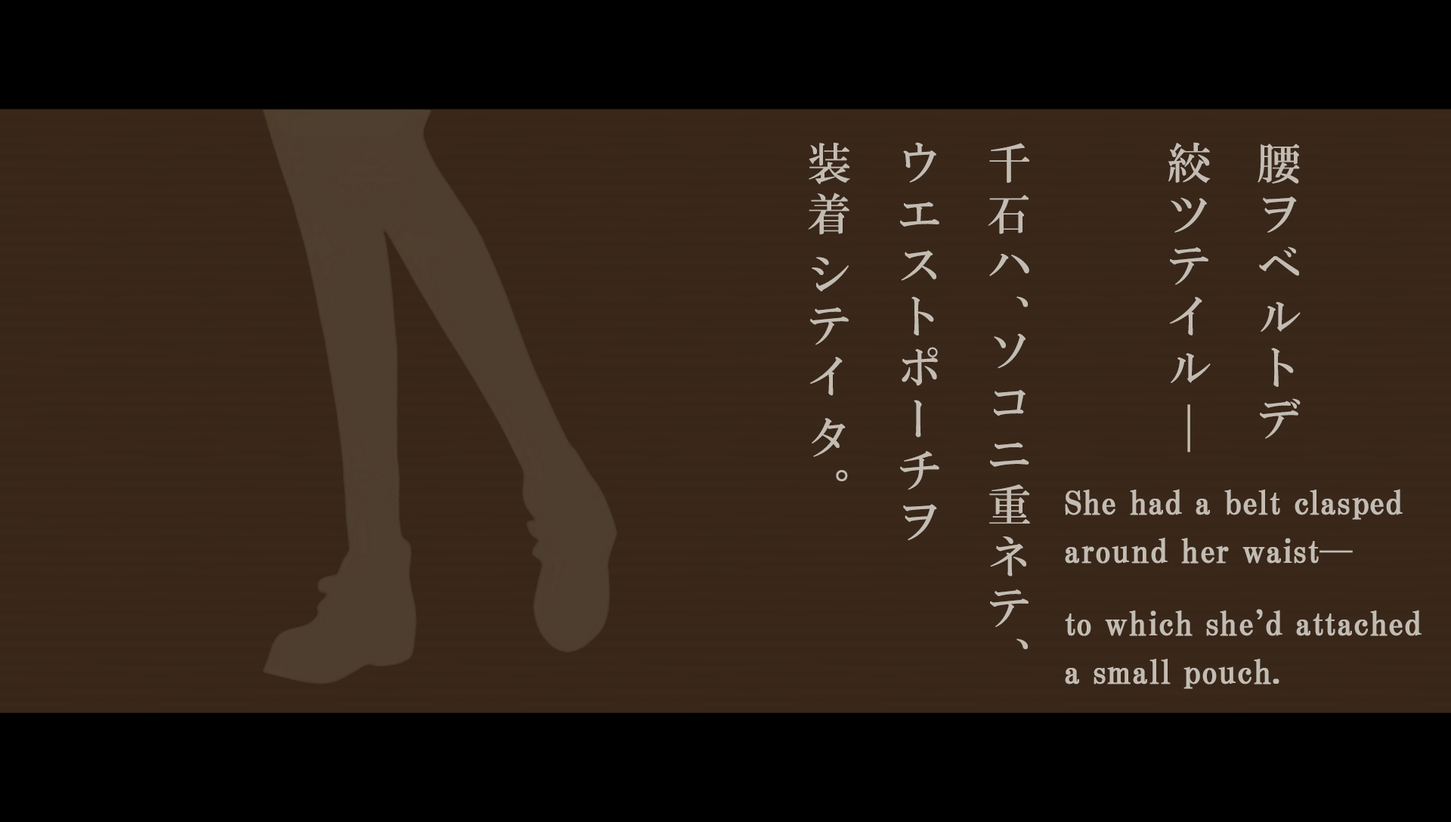
<style>
.page{position:relative;width:1451px;height:822px;background:#000000}
.page>*{position:absolute;margin:0}
.t1{font:43.8px/89.9px "HGMinchoB";letter-spacing:0.17em;color:#c3bcb3}
.t2{font:43.8px/89.9px "HGMinchoB";letter-spacing:0.35em;color:#c3bcb3}
.t3{font:43.8px/89.9px "HGMinchoB";letter-spacing:0.17em;color:#c3bcb3;scale:1.08 1}
.t4{font:43.8px/89.9px "HGMinchoB";letter-spacing:-0.21em;color:#c3bcb3}
.t5{font:43.8px/89.9px "HGMinchoB";letter-spacing:0.37em;color:#c3bcb3}
.t6{font:43.8px/89.9px "HGMinchoB";letter-spacing:0.41em;color:#c3bcb3}
.t7{font:32.2px/48.4px "HGPMinchoB";letter-spacing:0.01em;color:#c3bcb3;font-weight:bold}
.t8{font:32.2px/72.5px "HGPMinchoB";letter-spacing:0.01em;color:#c3bcb3;font-weight:bold}
.t9{font:32.2px/72.5px "HGPMinchoB";letter-spacing:-0.075em;color:#c3bcb3;font-weight:bold}
.t10{font:32.2px/72.5px "HGPMinchoB";letter-spacing:-0.1em;color:#c3bcb3;font-weight:bold}
</style>
<div class="page">
<p class="t1" style="left:808px;top:142px;width:492px;height:508px">腰ヲベルトデ<br>絞ツテイ<span class="t2">ル</span><span class="t3">|<br></span><br>千石ハ<span class="t4">、</span>ソコニ重ネテ、<br>ウエストポーチヲ<br>装<span class="t5">着</span>シテ<span class="t6">イ</span>タ。</p>
<p class="t7" style="left:1065px;top:489px;width:356px;height:200px">She had a belt clasped<br>around her waist─<br><span class="t8">to which sh</span><span class="t9">e</span><span class="t10">’</span><span class="t8">d attached<br></span>a small pouch.</p>
</div>
